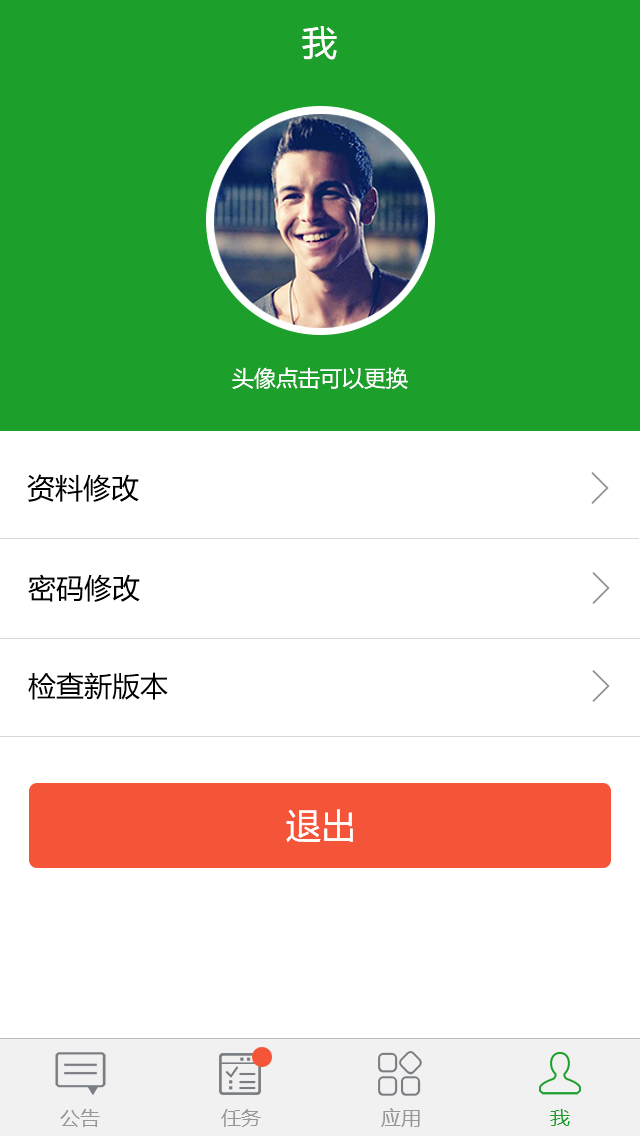
<style>
.page{position:relative;width:640px;height:1136px;background:#ffffff}
.page>*{position:absolute;margin:0}
.t1{font:35px "MicrosoftYaHei";color:#ffffff}
.t2{font:22px "MicrosoftYaHei";color:#ffffff}
.t3{font:28px "MicrosoftYaHei";color:#000000}
.t4{font:20px "MicrosoftYaHei";color:#979798}
.t5{font:20px "MicrosoftYaHei";color:#1da02b}
</style>
<div class="page">
<p class="t1" style="left:302px;top:26px;width:35px;height:34px">我</p>
<p class="t2" style="left:232px;top:367px;width:176px;height:22px">头像点击可以更换</p>
<p class="t3" style="left:27px;top:474px;width:112px;height:28px">资料修改</p>
<p class="t3" style="left:28px;top:574px;width:112px;height:28px">密码修改</p>
<p class="t3" style="left:28px;top:672px;width:140px;height:28px">检查新版本</p>
<p class="t1" style="left:286px;top:809px;width:67px;height:33px">退出</p>
<p class="t4" style="left:60px;top:1109px;width:40px;height:18px">公告</p>
<p class="t4" style="left:221px;top:1109px;width:40px;height:18px">任务</p>
<p class="t4" style="left:381px;top:1108px;width:39px;height:19px">应用</p>
<p class="t5" style="left:550px;top:1109px;width:20px;height:17px">我</p>
</div>
